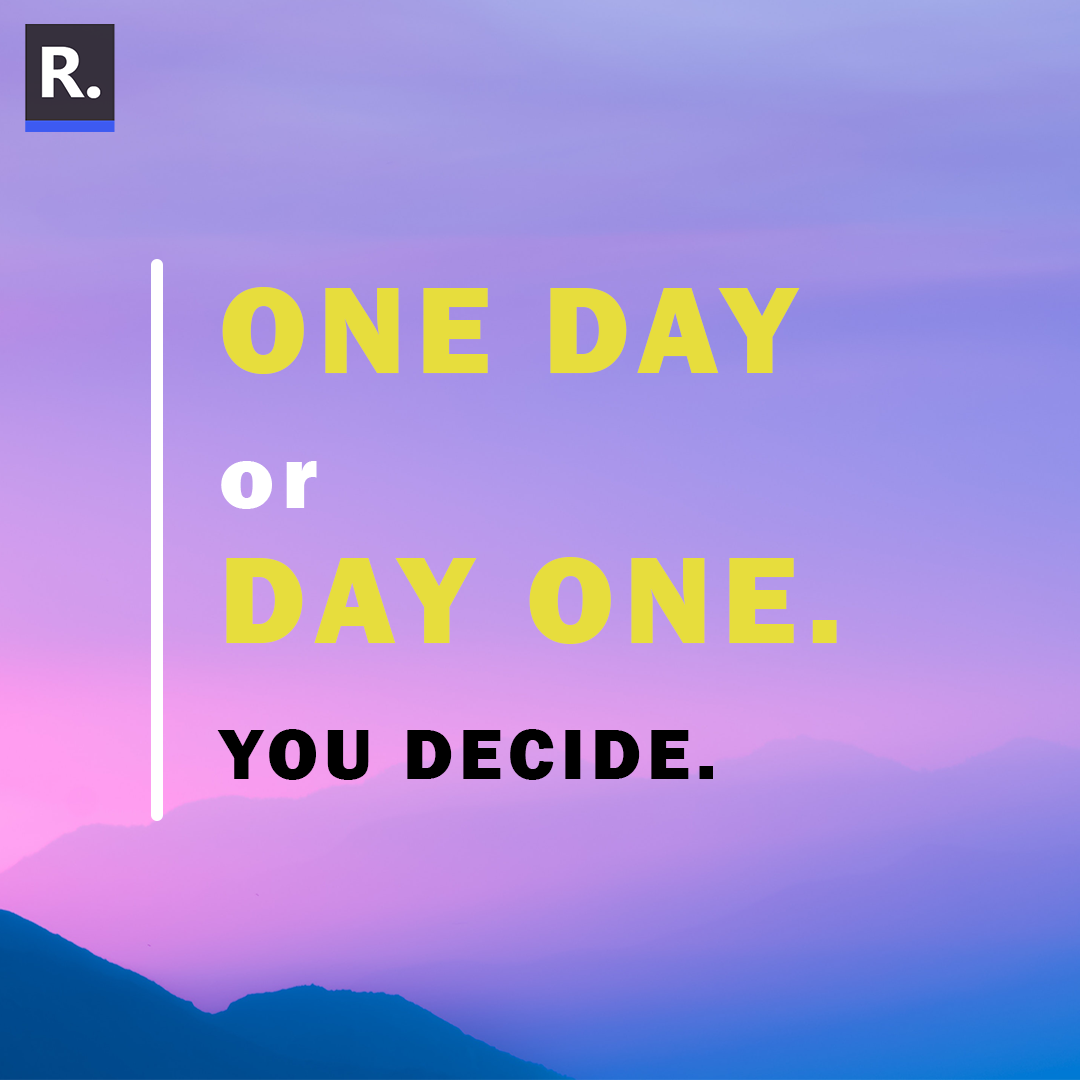
<style>
.page{position:relative;width:1080px;height:1080px}
.page>*{position:absolute;margin:0}
.t1{font:74.3px/135.4px "FranklinGothic-Heavy";letter-spacing:0.08em;color:#000000}
.t2{font:127.7px/135.4px "FranklinGothic-Heavy";letter-spacing:0.08em;color:#e7dd3d}
.t3{font:92.9px/135.4px "FranklinGothic-Heavy";letter-spacing:0.08em;color:#ffffff}
</style>
<div class="page">
<p class="t1" style="left:217px;top:287px;width:620px;height:493px;text-align:right"><span class="t2">ONE DAY<br></span><span class="t3">or <br></span><span class="t2">DAY ONE.<br></span>YOU DECIDE.</p>
</div>
